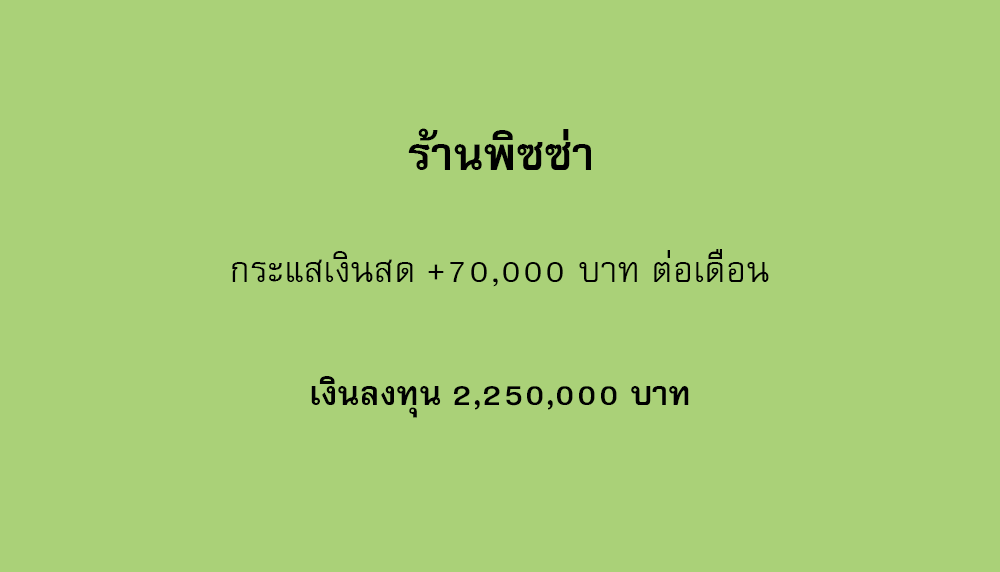
<style>
.page{position:relative;width:1000px;height:572px;background:#aad178}
.page>*{position:absolute;margin:0}
.t1{font:64px "FreesiaUPCBold";color:#000000}
.t2{font:50px "FreesiaUPC";color:#000000}
.t3{font:47px "FreesiaUPCBold";color:#000000}
</style>
<div class="page">
<p class="t1" style="left:408px;top:128px;width:183px;height:42px">ร้านพิซซ่า</p>
<p class="t2" style="left:232px;top:249px;width:537px;height:38px">กระแสเงินสด +70,000 บาท ต่อเดือน</p>
<p class="t3" style="left:311px;top:376px;width:378px;height:42px">เงินลงทุน 2,250,000 บาท</p>
</div>
